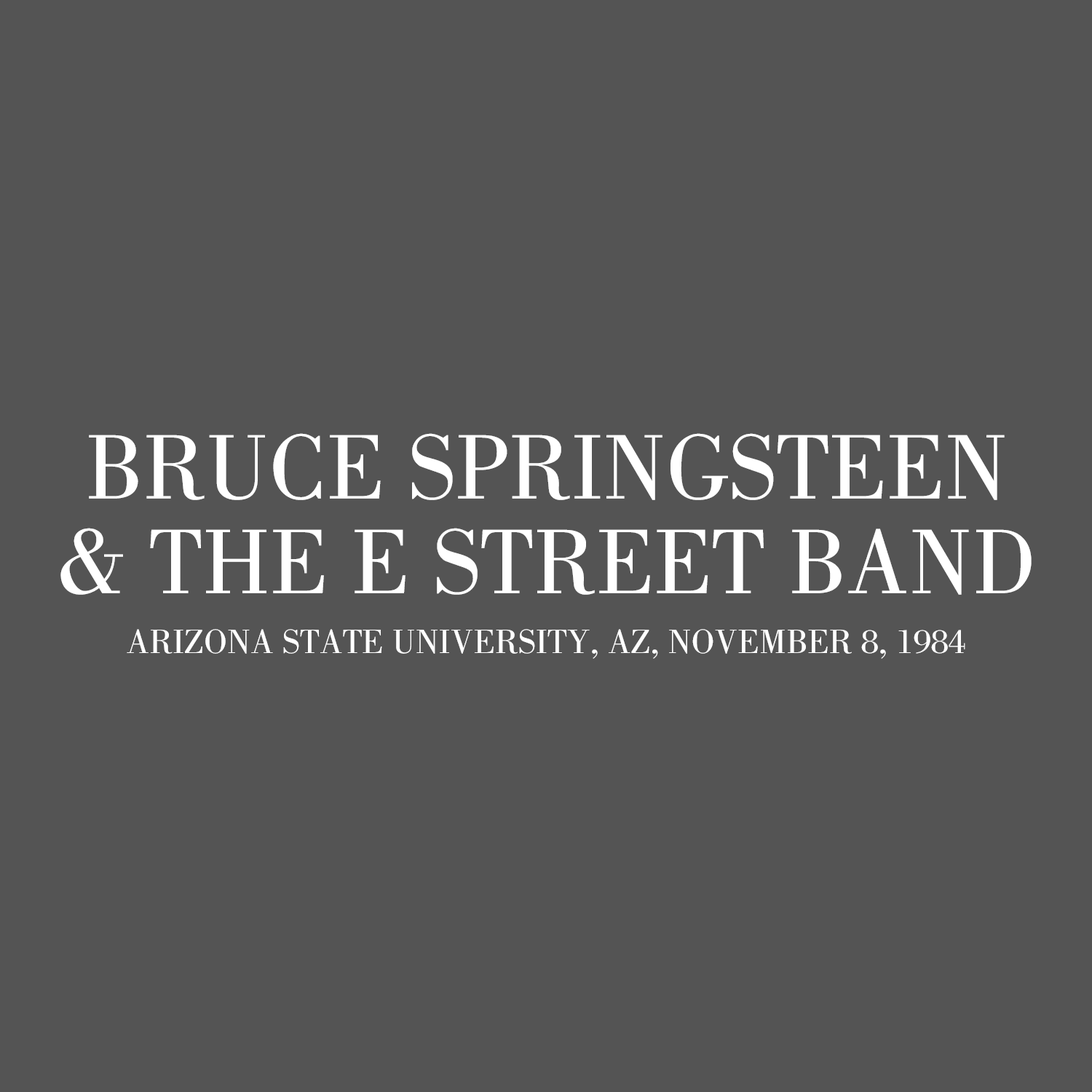
<style>
.page{position:relative;width:1092px;height:1092px;background:#545454}
.page>*{position:absolute;margin:0}
.t1{font:94.6px/109.2px "BodoniStd-Book";color:#ffffff}
.t2{font:94.6px/94.6px "BodoniStd-Book";color:#ffffff}
.t3{font:34.9px "BodoniStd-Book";color:#ffffff}
</style>
<div class="page">
<p class="t1" style="left:60px;top:433px;width:972px;height:162px;text-align:center"><span class="t2"> BRUCE SPRINGSTEEN <br></span>&amp; THE E STREET BAND</p>
<p class="t3" style="left:127px;top:629px;width:838px;height:30px">ARIZONA STATE UNIVERSITY, AZ, NOVEMBER 8, 1984</p>
</div>
